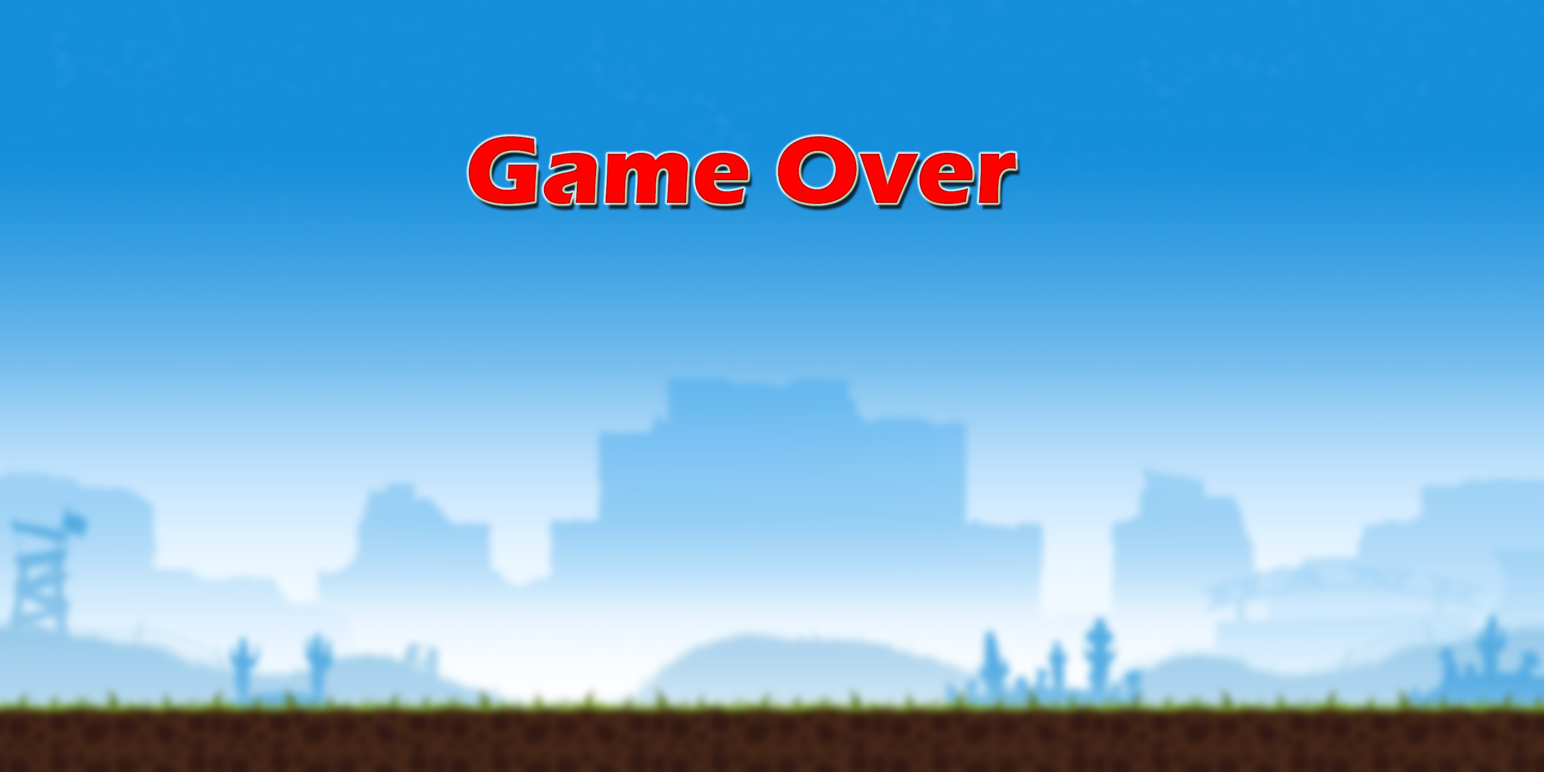
<style>
.page{position:relative;width:1544px;height:772px}
.page>*{position:absolute;margin:0}
.t1{font:97.8px "ErasITC-Bold";color:#ff0000}
</style>
<div class="page">
<p class="t1" style="left:468px;top:136px;width:548px;height:68px">Game Over</p>
</div>
